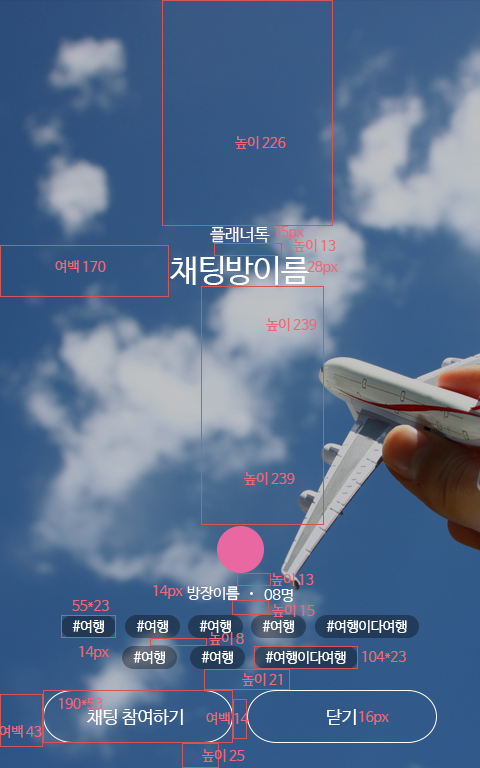
<style>
.page{position:relative;width:480px;height:768px}
.page>*{position:absolute;margin:0}
.t1{font:14px "NanumBarunGothic";letter-spacing:-0.025em;color:#eb6877}
.t2{font:17px "NanumBarunGothic";letter-spacing:-0.025em;color:#ffffff}
.t3{font:32px "NanumBarunGothic";letter-spacing:-0.025em;color:#ffffff}
.t4{font:15px "NanumBarunGothic";letter-spacing:-0.025em;color:#ffffff}
.t5{font:14px "NanumBarunGothic";letter-spacing:-0.025em;color:#ffffff}
.t6{font:18px "NanumBarunGothic";letter-spacing:-0.025em;color:#ffffff}
.t7{font:18px "NanumBarunGothic";letter-spacing:-0.025em;color:#fffefe}
</style>
<div class="page">
<p class="t1" style="left:235px;top:136px;width:51px;height:13px">높이 226</p>
<p class="t2" style="left:210px;top:226px;width:60px;height:17px">플래너톡</p>
<p class="t1" style="left:274px;top:226px;width:30px;height:14px">15px</p>
<p class="t1" style="left:293px;top:239px;width:43px;height:13px">높이 13</p>
<p class="t3" style="left:170px;top:256px;width:140px;height:29px">채팅방이름</p>
<p class="t1" style="left:55px;top:260px;width:51px;height:13px">여백 170</p>
<p class="t1" style="left:307px;top:261px;width:31px;height:14px">28px</p>
<p class="t1" style="left:266px;top:318px;width:51px;height:13px">높이 239</p>
<p class="t1" style="left:244px;top:472px;width:51px;height:13px">높이 239</p>
<p class="t1" style="left:271px;top:573px;width:43px;height:13px">높이 13</p>
<p class="t1" style="left:153px;top:585px;width:30px;height:14px">14px</p>
<p class="t4" style="left:187px;top:586px;width:53px;height:15px">방장이름</p>
<p class="t4" style="left:264px;top:589px;width:29px;height:13px">08명</p>
<p class="t1" style="left:72px;top:600px;width:37px;height:11px">55*23</p>
<p class="t1" style="left:272px;top:604px;width:43px;height:13px">높이 15</p>
<p class="t5" style="left:72px;top:620px;width:32px;height:13px">#여행</p>
<p class="t5" style="left:136px;top:620px;width:32px;height:13px">#여행</p>
<p class="t5" style="left:199px;top:620px;width:32px;height:13px">#여행</p>
<p class="t5" style="left:262px;top:620px;width:32px;height:13px">#여행</p>
<p class="t5" style="left:326px;top:620px;width:81px;height:13px">#여행이다여행</p>
<p class="t1" style="left:209px;top:632px;width:35px;height:13px">높이 8</p>
<p class="t1" style="left:79px;top:646px;width:30px;height:14px">14px</p>
<p class="t5" style="left:133px;top:651px;width:32px;height:13px">#여행</p>
<p class="t5" style="left:201px;top:651px;width:32px;height:13px">#여행</p>
<p class="t5" style="left:265px;top:651px;width:81px;height:13px">#여행이다여행</p>
<p class="t1" style="left:362px;top:651px;width:44px;height:11px">104*23</p>
<p class="t1" style="left:242px;top:673px;width:40px;height:13px">높이 21</p>
<p class="t1" style="left:59px;top:698px;width:44px;height:11px">190*53</p>
<p class="t6" style="left:87px;top:709px;width:96px;height:16px">채팅 참여하기</p>
<p class="t1" style="left:206px;top:712px;width:43px;height:13px">여백 14</p>
<p class="t7" style="left:327px;top:709px;width:29px;height:16px">닫기</p>
<p class="t1" style="left:359px;top:711px;width:30px;height:14px">16px</p>
<p class="t1" style="left:0px;top:725px;width:42px;height:13px">여백 43</p>
<p class="t1" style="left:202px;top:749px;width:43px;height:13px">높이 25</p>
</div>
